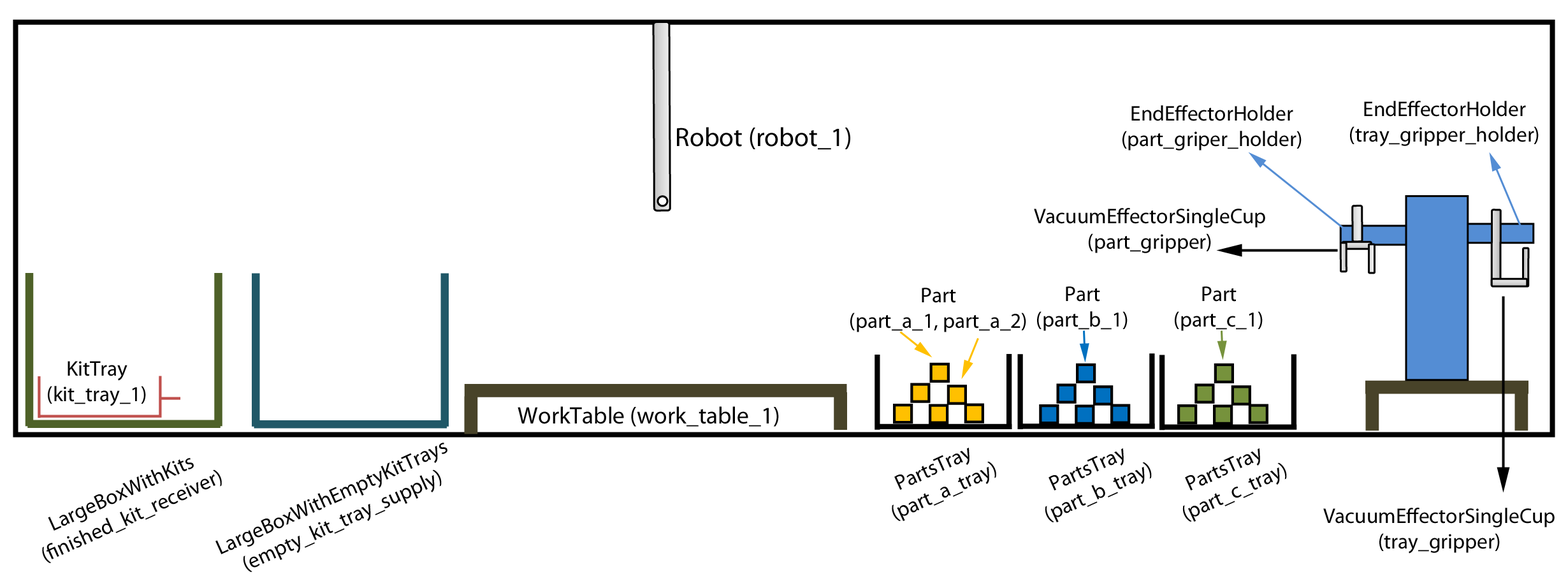
<style>
.page{position:relative;width:1568px;height:574px;background:#ffffff}
.page>*{position:absolute;margin:0}
.t1{font:21.2px "MyriadPro-Regular";color:#000000}
.t2{font:26.6px "MyriadPro-Regular";color:#000000}
.t3{font:23.9px "MyriadPro-Regular";color:#000000}
</style>
<div class="page">
<p class="t1" style="left:1350px;top:101px;width:189px;height:46px;text-align:center">EndEffectorHolder<br>(tray_gripper_holder)</p>
<p class="t1" style="left:1122px;top:105px;width:180px;height:45px;text-align:center">EndEffectorHolder<br>(part_griper_holder)</p>
<p class="t2" style="left:677px;top:127px;width:173px;height:23px">Robot (robot_1)</p>
<p class="t1" style="left:1034px;top:208px;width:231px;height:45px;text-align:center">VacuumEffectorSingleCup<br>(part_gripper)</p>
<p class="t1" style="left:850px;top:287px;width:176px;height:45px;text-align:center">Part<br>(part_a_1, part_a_2)</p>
<p class="t1" style="left:1037px;top:286px;width:91px;height:45px;text-align:center">Part<br>(part_b_1)</p>
<p class="t1" style="left:1175px;top:286px;width:88px;height:45px;text-align:center">Part<br>(part_c_1)</p>
<p class="t1" style="left:48px;top:361px;width:98px;height:45px;text-align:center">KitTray<br>(kit_tray_1)</p>
<p class="t3" style="left:518px;top:406px;width:261px;height:20px">WorkTable (work_table_1)</p>
<p class="t1" style="left:215px;top:442px;width:232px;height:130px;text-align:center;rotate:-24deg">LargeBoxWithEmptyKitTrays<br>(empty_kit_tray_supply)</p>
<p class="t1" style="left:892px;top:447px;width:104px;height:74px;text-align:center;rotate:-24deg">PartsTray<br>(part_a_tray)</p>
<p class="t1" style="left:1045px;top:448px;width:107px;height:74px;text-align:center;rotate:-24deg">PartsTray<br>(part_b_tray)</p>
<p class="t1" style="left:1182px;top:448px;width:105px;height:73px;text-align:center;rotate:-24deg">PartsTray<br>(part_c_tray)</p>
<p class="t1" style="left:42px;top:458px;width:180px;height:105px;text-align:center;rotate:-24deg">LargeBoxWithKits<br>(finished_kit_receiver)</p>
<p class="t1" style="left:1323px;top:507px;width:232px;height:46px;text-align:center">VacuumEffectorSingleCup<br>(tray_gripper)</p>
</div>
